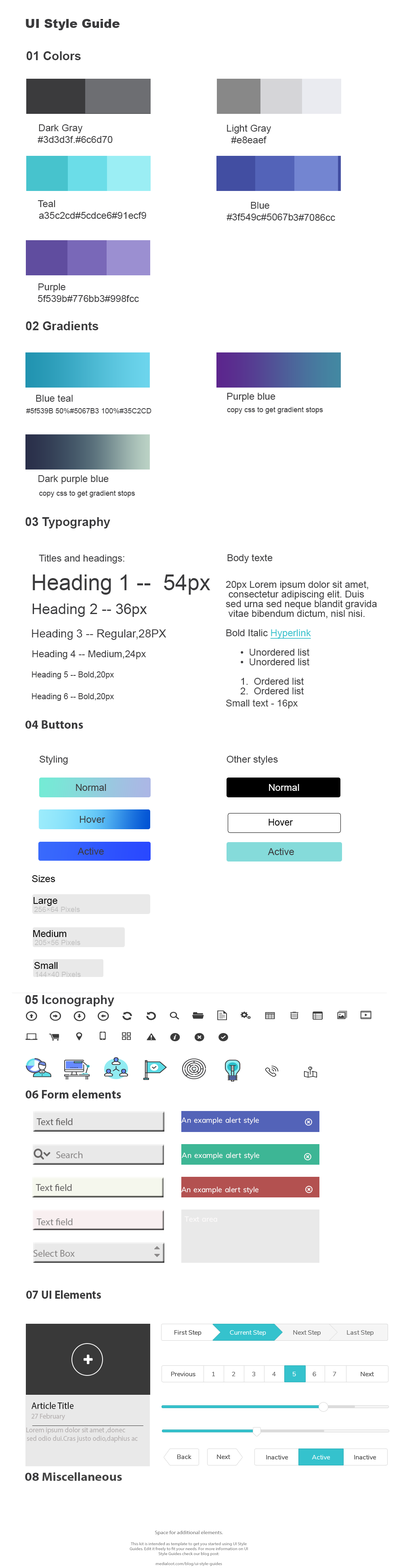
<style>
.page{position:relative;width:403px;height:1568px;background:#ffffff}
.page>*{position:absolute;margin:0}
.t1{font:12.1px "Arial-Black";color:#3b3b3d}
.t2{font:9.7px "ArialMT";color:#3b3b3d}
.t3{font:12.1px "Arial-BoldMT";color:#3b3b3d}
.t4{font:7.3px "ArialMT";color:#3b3b3d}
.t5{font:21.8px "ArialMT";color:#3b3b3d}
.t6{font:9.7px/9.7px "ArialMT";color:#3d3d3f}
.t7{font:9.7px/9.7px "ArialMT";color:#35c2cd;text-decoration:underline}
.t8{font:9.7px/12.1px "ArialMT";color:#444444}
.t9{font:14.5px "ArialMT";color:#3b3b3d}
.t10{font:11.3px "ArialMT";color:#3b3b3d}
.t11{font:8.1px "ArialMT";color:#3b3b3d}
.t12{font:12.1px "MyriadPro-Bold";color:#3b3b3d}
.t13{font:12.1px "FontAwesome5Free-Regular";color:#3b3b3d}
.t14{font:9.7px "ArialMT";color:#ffffff}
.t15{font:9.2px "ArialMT";color:#000000}
.t16{font:9.7px "ArialMT";color:#000000}
.t17{font:7.3px "ArialMT";color:#c5c5c5}
.t18{font:9.7px "ArialMT";color:#c5c5c5}
.t19{font:12.1px "MyriadPro-Regular";color:#3b3b3d}
.t20{font:9.7px "MyriadPro-Regular";color:#686666}
.t21{font:9.7px "MyriadPro-Regular";color:#8b8989}
.t22{font:12px "MyriadPro-Bold";color:#3b3b3d;scale:0.95 1}
.t23{font:6.5px "NunitoSans-Regular";color:#444444}
.t24{font:6.5px "NunitoSans-Regular";color:#ffffff}
.t25{font:6.5px "NunitoSans-Regular";color:#666666}
.t26{font:9.6px "MyriadPro-Regular";color:#181818;scale:0.95 1}
.t27{font:7.2px "MyriadPro-Regular";color:#b5b1b1;scale:0.95 1}
.t28{font:9.6px "MyriadPro-Regular";color:#b5b1b1;scale:0.95 1}
.t29{font:6.5px "NunitoSans-Regular";color:#454545}
.t30{font:12px "MyriadPro-Bold";color:#444444;scale:1.07 1}
.t31{font:12px "MyriadPro-Bold";color:#3b3b3d;scale:1.07 1}
.t32{font:4.1px "MyriadPro-Regular";color:#666666;scale:1.07 1}
.t33{font:5.1px "MyriadPro-Regular";color:#666666;scale:1.07 1}
</style>
<div class="page">
<p class="t1" style="left:26px;top:19px;width:94px;height:11px"><span class="t2">                       </span>UI Style Guide</p>
<p class="t3" style="left:26px;top:51px;width:55px;height:9px">01 Colors</p>
<p class="t2" style="left:38px;top:124px;width:75px;height:19px;text-align:center">Dark Gray<br>                            #3d3d3f.#6c6d70</p>
<p class="t2" style="left:227px;top:124px;width:44px;height:19px;text-align:center">Light Gray<br>#e8eaef</p>
<p class="t2" style="left:38px;top:200px;width:108px;height:19px;text-align:center">Teal<br>                                         a35c2cd#5cdce6#91ecf9</p>
<p class="t2" style="left:226px;top:202px;width:67px;height:18px;text-align:center">Blue<br>#3f549c#5067b</p>
<p class="t2" style="left:293px;top:214px;width:42px;height:7px">3#7086cc</p>
<p class="t2" style="left:38px;top:283px;width:101px;height:19px;text-align:center">Purple<br>                                     5f539b#776bb3#998fcc</p>
<p class="t3" style="left:26px;top:321px;width:73px;height:9px"><span class="t2">                     </span>02 Gradients</p>
<p class="t2" style="left:227px;top:393px;width:48px;height:9px"><span class="t3">                   </span>Purple blue</p>
<p class="t4" style="left:227px;top:407px;width:96px;height:7px">copy css to get gradient stops</p>
<p class="t2" style="left:38px;top:475px;width:71px;height:9px"><span class="t4">                               </span>Dark purple blue</p>
<p class="t4" style="left:39px;top:491px;width:96px;height:6px">copy css to get gradient stops</p>
<p class="t3" style="left:25px;top:517px;width:85px;height:11px"><span class="t2">                                </span>03 Typography</p>
<p class="t2" style="left:39px;top:554px;width:85px;height:10px">Titles and headings:</p>
<p class="t2" style="left:227px;top:554px;width:46px;height:9px">Body texte</p>
<p class="t5" style="left:33px;top:574px;width:177px;height:21px"><span class="t2">                          </span>Heading 1 --  54px</p>
<p class="t6" style="left:226px;top:581px;width:151px;height:128px">20px Lorem ipsum dolor sit amet,<br> consectetur adipiscing elit. Duis <br>sed urna sed neque blandit gravida<br> vitae bibendum dictum, nisl nisi.<br><br>Bold Italic <span class="t7">Hyperlink <br><br></span> •  Unordered list<br> •  Unordered list<br><br> 1.  Ordered list<br> 2.  Ordered list<br><span class="t8">Small text - 16px</span></p>
<p class="t9" style="left:33px;top:604px;width:114px;height:13px">Heading 2 -- 36px</p>
<p class="t10" style="left:32px;top:629px;width:134px;height:11px">Heading 3 -- Regular,28PX</p>
<p class="t2" style="left:32px;top:650px;width:114px;height:9px">Heading 4 -- Medium,24px</p>
<p class="t11" style="left:32px;top:671px;width:82px;height:8px">Heading 5 -- Bold,20px</p>
<p class="t11" style="left:32px;top:693px;width:82px;height:8px">Heading 6 -- Bold,20px</p>
<p class="t12" style="left:25px;top:720px;width:58px;height:9px"><span class="t13">            </span>04 Buttons</p>
<p class="t2" style="left:40px;top:755px;width:28px;height:10px">Styling</p>
<p class="t2" style="left:226px;top:755px;width:52px;height:10px">Other styles</p>
<p class="t2" style="left:76px;top:784px;width:30px;height:7px">Normal</p>
<p class="t14" style="left:269px;top:784px;width:30px;height:7px">Normal</p>
<p class="t2" style="left:80px;top:816px;width:25px;height:7px">Hover</p>
<p class="t15" style="left:268px;top:819px;width:25px;height:7px">Hover</p>
<p class="t2" style="left:78px;top:847px;width:26px;height:8px">Active</p>
<p class="t2" style="left:268px;top:848px;width:26px;height:7px">Active</p>
<p class="t16" style="left:32px;top:875px;width:23px;height:7px">Sizes</p>
<p class="t16" style="left:34px;top:897px;width:23px;height:9px">Large</p>
<p class="t17" style="left:34px;top:907px;width:46px;height:5px"><span class="t18">       </span>256×64 Pixels</p>
<p class="t16" style="left:33px;top:930px;width:34px;height:7px">Medium</p>
<p class="t17" style="left:35px;top:940px;width:45px;height:5px"><span class="t18">       </span>205×56 Pixels</p>
<p class="t16" style="left:34px;top:962px;width:24px;height:7px">Small</p>
<p class="t17" style="left:36px;top:972px;width:45px;height:5px"><span class="t18">       </span>144×40 Pixels</p>
<p class="t3" style="left:25px;top:995px;width:89px;height:11px"><span class="t2">                            </span>05 Iconography</p>
<p class="t12" style="left:25px;top:1090px;width:96px;height:8px"><span class="t19">                                    </span>06 Form elements</p>
<p class="t20" style="left:36px;top:1118px;width:37px;height:7px">Text field</p>
<p class="t21" style="left:56px;top:1151px;width:27px;height:7px">Search</p>
<p class="t20" style="left:36px;top:1184px;width:36px;height:7px">Text field</p>
<p class="t21" style="left:36px;top:1218px;width:37px;height:7px">Text field</p>
<p class="t21" style="left:33px;top:1250px;width:42px;height:7px">Select Box</p>
<p class="t22" style="left:26px;top:1290px;width:75px;height:9px">07 UI Elements</p>
<p class="t23" style="left:174px;top:1330px;width:27px;height:6px">First Step</p>
<p class="t24" style="left:230px;top:1330px;width:36px;height:6px">Current Step</p>
<p class="t25" style="left:293px;top:1330px;width:28px;height:6px">Next Step</p>
<p class="t25" style="left:347px;top:1330px;width:26px;height:6px">Last Step</p>
<p class="t23" style="left:171px;top:1372px;width:24px;height:4px">Previous</p>
<p class="t25" style="left:212px;top:1372px;width:3px;height:4px">1</p>
<p class="t25" style="left:232px;top:1372px;width:3px;height:4px">2</p>
<p class="t25" style="left:252px;top:1372px;width:3px;height:4px">3</p>
<p class="t25" style="left:272px;top:1372px;width:4px;height:4px">4</p>
<p class="t24" style="left:293px;top:1372px;width:3px;height:4px">5</p>
<p class="t25" style="left:312px;top:1372px;width:4px;height:4px">6</p>
<p class="t25" style="left:333px;top:1372px;width:3px;height:4px">7</p>
<p class="t23" style="left:361px;top:1372px;width:13px;height:4px">Next</p>
<p class="t26" style="left:31px;top:1402px;width:43px;height:7px">Article Title</p>
<p class="t27" style="left:31px;top:1413px;width:34px;height:7px"><span class="t28">                       </span>27 February</p>
<p class="t27" style="left:26px;top:1427px;width:112px;height:15px;text-align:center">Lorem ipsum dolor sit amet ,donec<br>              sed odio dui.Cras justo odio,daphius ac</p>
<p class="t29" style="left:177px;top:1455px;width:14px;height:4px">Back</p>
<p class="t29" style="left:217px;top:1455px;width:13px;height:4px">Next</p>
<p class="t29" style="left:266px;top:1455px;width:22px;height:4px">Inactive</p>
<p class="t24" style="left:312px;top:1455px;width:18px;height:4px">Active</p>
<p class="t29" style="left:354px;top:1455px;width:22px;height:4px">Inactive</p>
<p class="t30" style="left:25px;top:1472px;width:97px;height:9px"><span class="t31">08 </span>Miscellaneous</p>
<p class="t32" style="left:130px;top:1530px;width:118px;height:36px;text-align:center"><span class="t33">Space for additional elements.<br><br></span>This kit is intended as template to get you started using UI Style Guides. Edit it freely to fit your needs. For more information on UI Style Guides check our blog post:<br><br>medialoot.com/blog/ui-style-guides</p>
</div>
